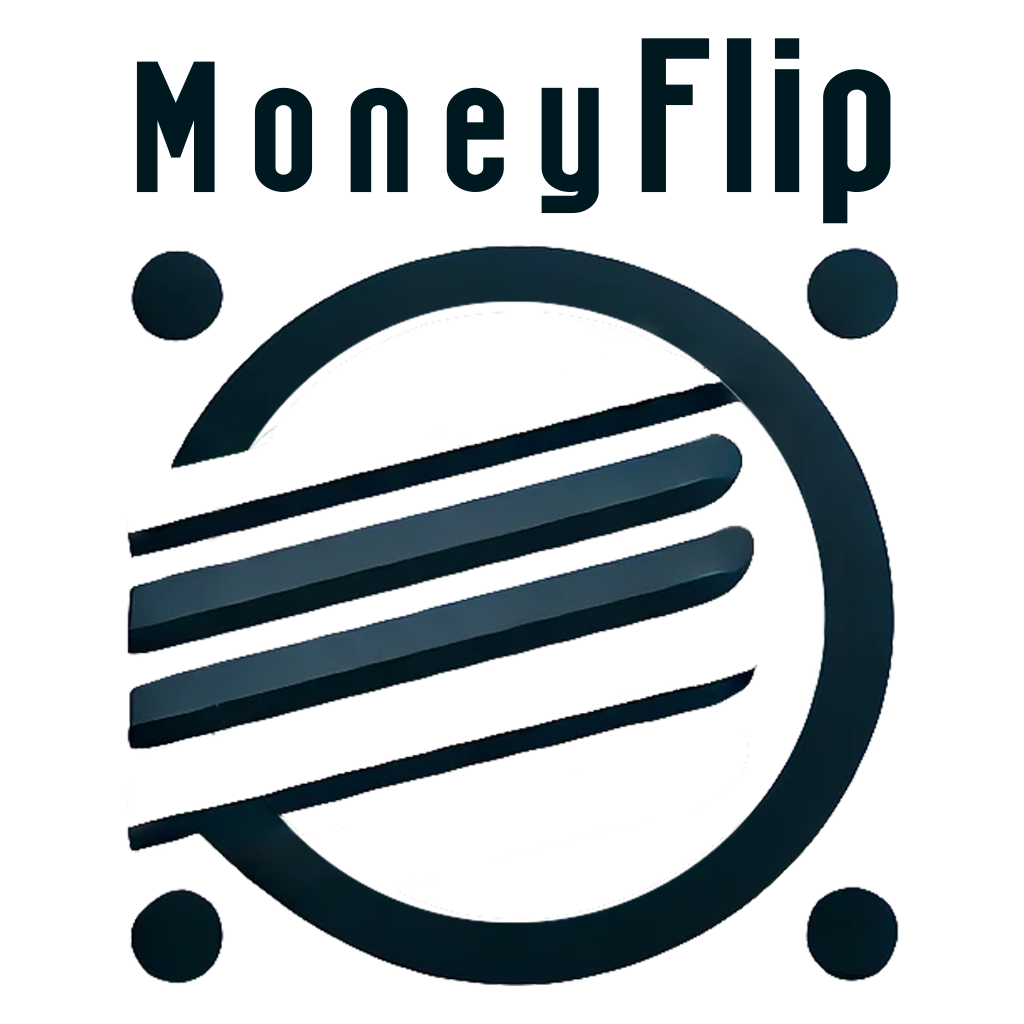
<style>
.page{position:relative;width:1024px;height:1024px;background:#ffffff}
.page>*{position:absolute;margin:0}
.t1{font:186.2px "HURSYRegular";letter-spacing:0.1em;color:#001820;scale:1.19 1}
.t2{font:219.5px "HURSYRegular";letter-spacing:0.01em;color:#001820;scale:1.19 1}
</style>
<div class="page">
<p class="t1" style="left:136px;top:38px;width:755px;height:186px">Money<span class="t2">Flip</span></p>
</div>
